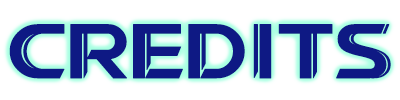
<style>
.page{position:relative;width:400px;height:100px;background:#ffffff}
.page>*{position:absolute;margin:0}
.t1{font:75px "SweraDemoShadowed";color:#0e1984;font-weight:bold}
</style>
<div class="page">
<p class="t1" style="left:9px;top:24px;width:382px;height:55px">Credits</p>
</div>
